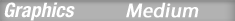
<style>
.page{position:relative;width:235px;height:21px;background:#b2b2b2}
.page>*{position:absolute;margin:0}
.t1{font:20px "HelveticaNeueLTPro-BdCnO";color:#ffffff}
.t2{font:20px "MyriadPro-Regular";color:#ffffff;font-weight:bold;font-style:italic}
</style>
<div class="page">
<p class="t1" style="left:4px;top:2px;width:71px;height:19px">Graphics</p>
<p class="t2" style="left:126px;top:2px;width:73px;height:16px">Medium</p>
</div>
